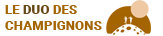
<style>
.page{position:relative;width:163px;height:36px;background:#ffffff}
.page>*{position:absolute;margin:0}
.t1{font:13.3px "Roboto-Black";color:#a46400}
.t2{font:13.3px "Roboto-Black";color:#674715}
</style>
<div class="page">
<p class="t1" style="left:5px;top:5px;width:97px;height:25px">LE <span class="t2">DUO </span>DES<br>CHAMPIGNONS</p>
</div>
